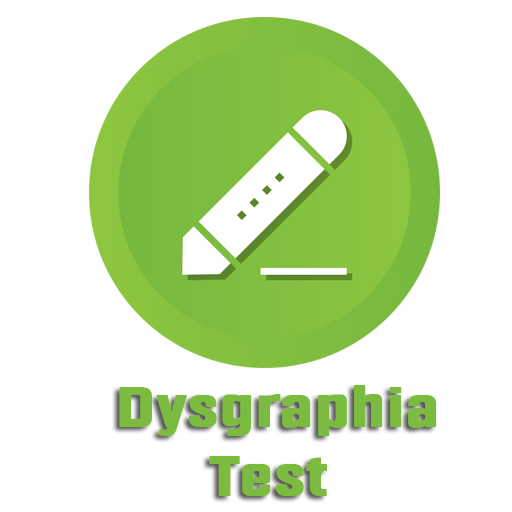
<style>
.page{position:relative;width:512px;height:512px;background:#ffffff}
.page>*{position:absolute;margin:0}
.t1{font:57.1px "Fragua-Bold";color:#7bbb3f;font-weight:bold;scale:1.17 1}
</style>
<div class="page">
<p class="t1" style="left:119px;top:385px;width:318px;height:111px;text-align:center">Dysgraphia <br>Test</p>
</div>
